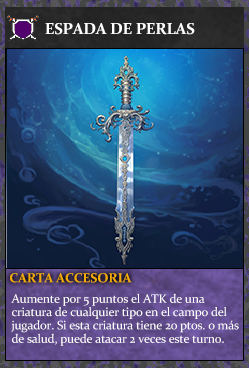
<style>
.page{position:relative;width:249px;height:368px}
.page>*{position:absolute;margin:0}
.t1{font:16px "Constantia-Bold";letter-spacing:-0.02em;color:#ffffff}
.t2{font:13.3px "Constantia-Bold";letter-spacing:-0.02em;color:#f2ac05}
.t3{font:12.3px/13.3px "Constantia";letter-spacing:-0.02em;color:#ffffff}
.t4{font:13.1px/13.3px "Constantia";letter-spacing:-0.02em;color:#ffffff}
</style>
<div class="page">
<p class="t1" style="left:45px;top:23px;width:150px;height:12px">ESPADA DE PERLAS</p>
<p class="t2" style="left:10px;top:273px;width:122px;height:10px">CARTA ACCESORIA</p>
<p class="t3" style="left:11px;top:293px;width:228px;height:53px">Aumente por 5 puntos el ATK de una <br>criatura de cualquier tipo en el campo del <br>jugador. Si esta criatura tiene 20 ptos. o más <br>de salud, puede atacar 2 veces este turno<span class="t4">.</span></p>
</div>
